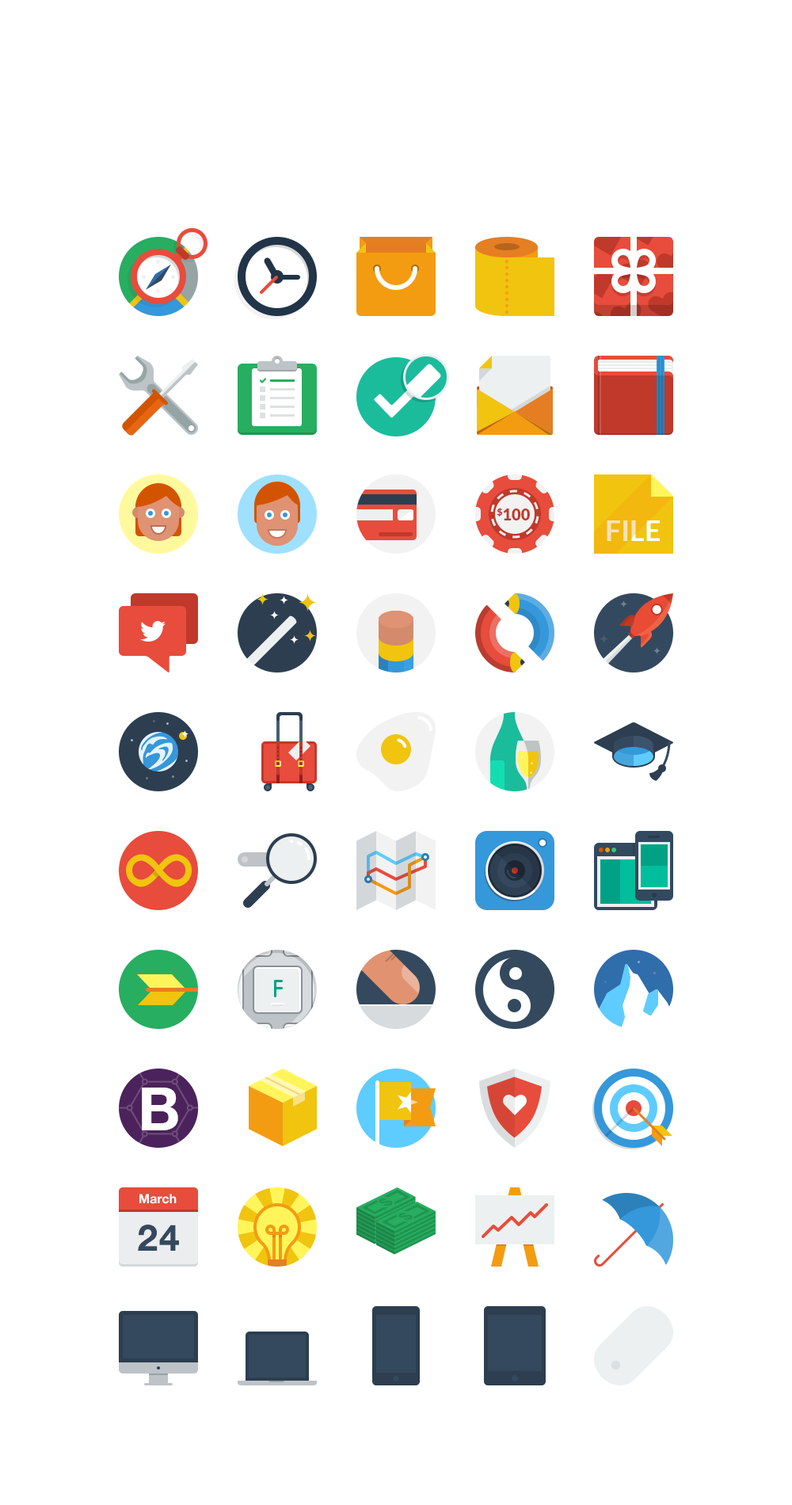
<style>
.page{position:relative;width:792px;height:1505px;background:#ffffff}
.page>*{position:absolute;margin:0}
.t1{font:16px "Lato-Black";color:#c0392b}
.t2{font:28.5px "Lato-Bold"}
.t3{font:60.3px "HelveticaNeue-Bold";letter-spacing:-0.05em;color:#ffffff}
.t4{font:12.7px "HelveticaNeue-Bold";color:#ffffff}
.t5{font:36.4px "HelveticaNeue-Bold";color:#34495e}
</style>
<div class="page">
<p class="t1" style="left:497px;top:508px;width:33px;height:12px">$100</p>
<p class="t2" style="left:607px;top:520px;width:53px;height:21px">FILE</p>
<p class="t3" style="left:142px;top:1088px;width:36px;height:42px">B</p>
<p class="t4" style="left:139px;top:1194px;width:38px;height:10px">March</p>
<p class="t5" style="left:138px;top:1225px;width:41px;height:26px">24</p>
</div>
